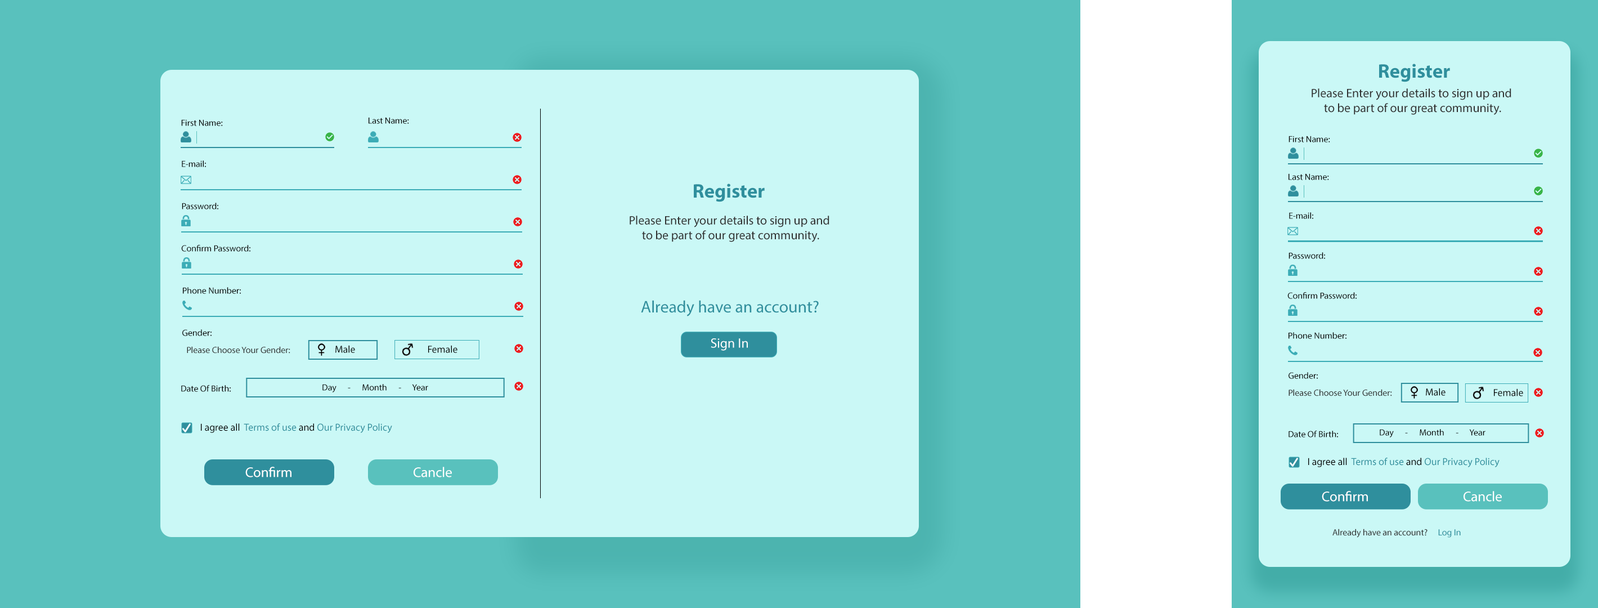
<style>
.page{position:relative;width:1598px;height:608px;background:#caf8f6}
.page>*{position:absolute;margin:0}
.t1{font:19.7px "MyriadPro-Bold";color:#2f8f9d}
.t2{font:12.4px "MyriadPro-Regular";color:#303030}
.t3{font:9px "MyriadPro-Regular";color:#000000}
.t4{font:16.9px "MyriadPro-Regular";color:#2f8f9d}
.t5{font:13.5px "MyriadPro-Regular";color:#ffffff}
.t6{font:9px "MyriadPro-Regular";color:#303030}
.t7{font:10.1px "MyriadPro-Regular";color:#000000}
.t8{font:10.1px "MyriadPro-Regular";color:#2f8f9d}
.t9{font:14.1px "MyriadPro-Regular";color:#ffffff}
.t10{font:9px "MyriadPro-Regular";color:#2f8f9d}
</style>
<div class="page">
<p class="t1" style="left:1379px;top:64px;width:71px;height:18px">Register</p>
<p class="t2" style="left:1311px;top:88px;width:200px;height:27px;text-align:center">Please Enter your details to sign up and <br>to be part of our great community.</p>
<p class="t3" style="left:181px;top:119px;width:42px;height:7px">First Name:</p>
<p class="t3" style="left:368px;top:117px;width:41px;height:7px">Last Name:</p>
<p class="t3" style="left:1288px;top:136px;width:42px;height:6px">First Name:</p>
<p class="t3" style="left:182px;top:160px;width:24px;height:7px">E-mail:</p>
<p class="t3" style="left:1288px;top:173px;width:41px;height:7px">Last Name:</p>
<p class="t1" style="left:694px;top:183px;width:70px;height:19px">Register</p>
<p class="t3" style="left:182px;top:202px;width:36px;height:7px">Password:</p>
<p class="t2" style="left:629px;top:215px;width:200px;height:27px;text-align:center">Please Enter your details to sign up and <br>to be part of our great community.</p>
<p class="t3" style="left:1289px;top:212px;width:24px;height:7px">E-mail:</p>
<p class="t3" style="left:181px;top:245px;width:69px;height:6px">Confirm Password:</p>
<p class="t3" style="left:1288px;top:252px;width:37px;height:7px">Password:</p>
<p class="t3" style="left:183px;top:287px;width:58px;height:7px">Phone Number:</p>
<p class="t3" style="left:1287px;top:292px;width:69px;height:7px">Confirm Password:</p>
<p class="t4" style="left:641px;top:300px;width:177px;height:16px">Already have an account?</p>
<p class="t3" style="left:182px;top:329px;width:30px;height:7px">Gender:</p>
<p class="t5" style="left:710px;top:338px;width:38px;height:12px">Sign In</p>
<p class="t3" style="left:1288px;top:332px;width:58px;height:7px">Phone Number:</p>
<p class="t6" style="left:187px;top:346px;width:103px;height:7px">Please Choose Your Gender:</p>
<p class="t7" style="left:335px;top:345px;width:20px;height:8px">Male</p>
<p class="t7" style="left:428px;top:345px;width:29px;height:8px">Female</p>
<p class="t3" style="left:1288px;top:372px;width:29px;height:7px">Gender:</p>
<p class="t3" style="left:181px;top:385px;width:50px;height:7px">Date Of Birth:</p>
<p class="t3" style="left:322px;top:384px;width:106px;height:8px">Day      -      Month      -      Year</p>
<p class="t6" style="left:1288px;top:389px;width:104px;height:7px">Please Choose Your Gender:</p>
<p class="t7" style="left:1425px;top:388px;width:20px;height:7px">Male</p>
<p class="t7" style="left:1493px;top:388px;width:30px;height:8px">Female</p>
<p class="t8" style="left:201px;top:423px;width:191px;height:10px"><span class="t7">I agree all  </span>Terms of use<span class="t7"> and </span>Our Privacy Policy</p>
<p class="t3" style="left:1288px;top:430px;width:50px;height:7px">Date Of Birth:</p>
<p class="t3" style="left:1379px;top:429px;width:106px;height:8px">Day      -      Month      -      Year</p>
<p class="t8" style="left:1308px;top:457px;width:191px;height:10px"><span class="t7">I agree all  </span>Terms of use<span class="t7"> and </span>Our Privacy Policy</p>
<p class="t9" style="left:245px;top:466px;width:46px;height:11px">Confirm</p>
<p class="t9" style="left:413px;top:466px;width:39px;height:11px">Cancle</p>
<p class="t9" style="left:1321px;top:490px;width:46px;height:11px">Confirm</p>
<p class="t9" style="left:1463px;top:490px;width:38px;height:11px">Cancle</p>
<p class="t6" style="left:1332px;top:528px;width:95px;height:9px">Already have an account?</p>
<p class="t10" style="left:1438px;top:529px;width:22px;height:8px">Log In</p>
</div>
